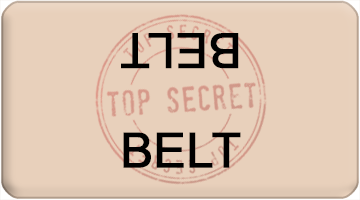
<style>
.page{position:relative;width:360px;height:200px;background:#e8d0bb}
.page>*{position:absolute;margin:0}
.t1{font:48px "ArialMT";color:#000000;font-weight:bold}
</style>
<div class="page">
<p class="t1" style="left:121px;top:33px;width:118px;height:36px;rotate:180deg">BELT</p>
<p class="t1" style="left:123px;top:132px;width:118px;height:36px">BELT</p>
</div>
